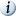
<style>
.page{position:relative;width:16px;height:16px}
.page>*{position:absolute;margin:0}
.t1{font:18px "CataneoBT-Regular";color:#000000}
</style>
<div class="page">
<p class="t1" style="left:6px;top:1px;width:4px;height:13px">i</p>
</div>
